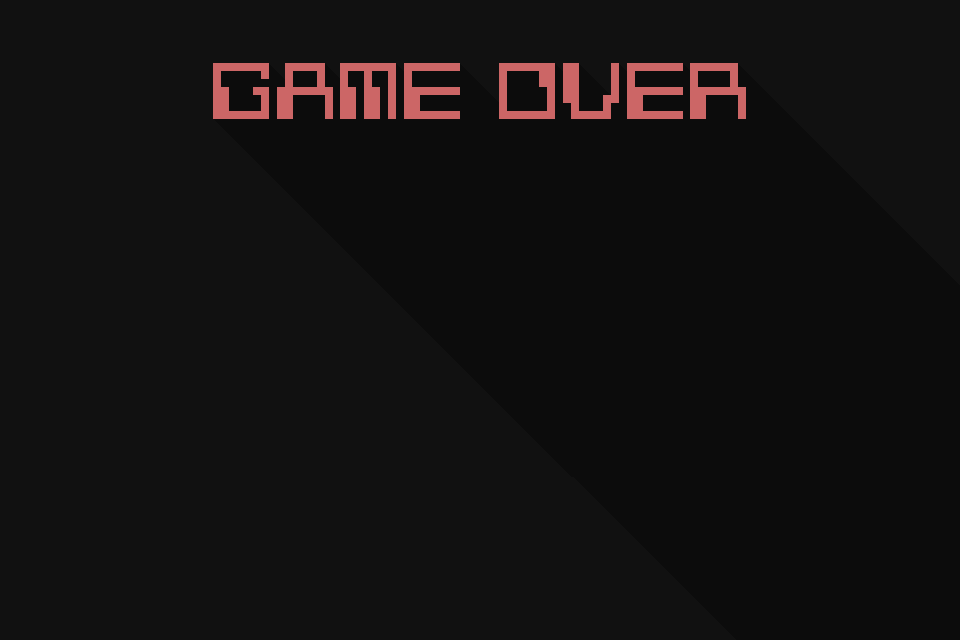
<style>
.page{position:relative;width:960px;height:640px;background:#111111}
.page>*{position:absolute;margin:0}
.t1{font:63.6px "G7-Silkworm-TTF";color:#cc6666}
</style>
<div class="page">
<p class="t1" style="left:213px;top:63px;width:533px;height:56px">GAME OVER</p>
</div>
